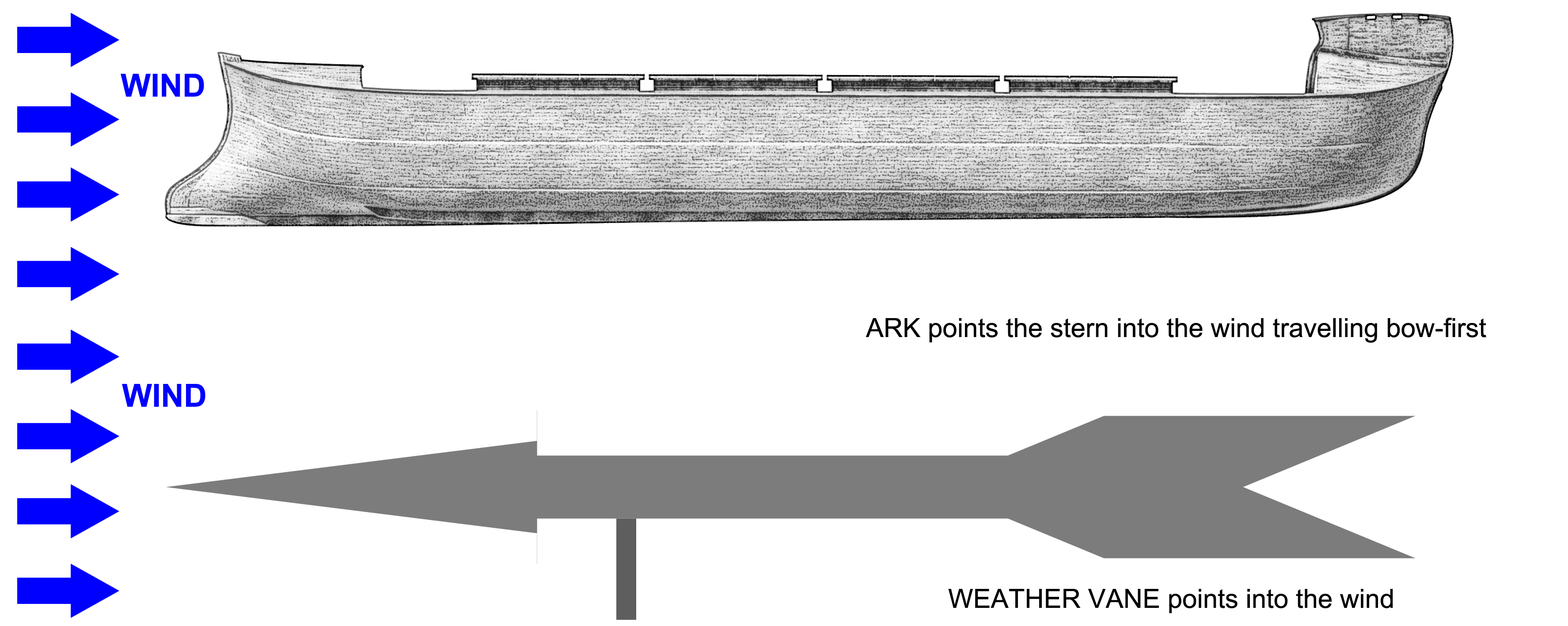
<style>
.page{position:relative;width:1568px;height:626px;background:#ffffff}
.page>*{position:absolute;margin:0}
.t1{font:31.8px "Arial-BoldMT";color:#0000ff}
.t2{font:26.5px "ArialMT";color:#000000}
</style>
<div class="page">
<p class="t1" style="left:121px;top:74px;width:83px;height:23px">WIND</p>
<p class="t2" style="left:866px;top:318px;width:620px;height:25px">ARK points the stern into the wind travelling bow-first</p>
<p class="t1" style="left:122px;top:384px;width:83px;height:23px">WIND</p>
<p class="t2" style="left:948px;top:589px;width:445px;height:24px">WEATHER VANE points into the wind</p>
</div>
